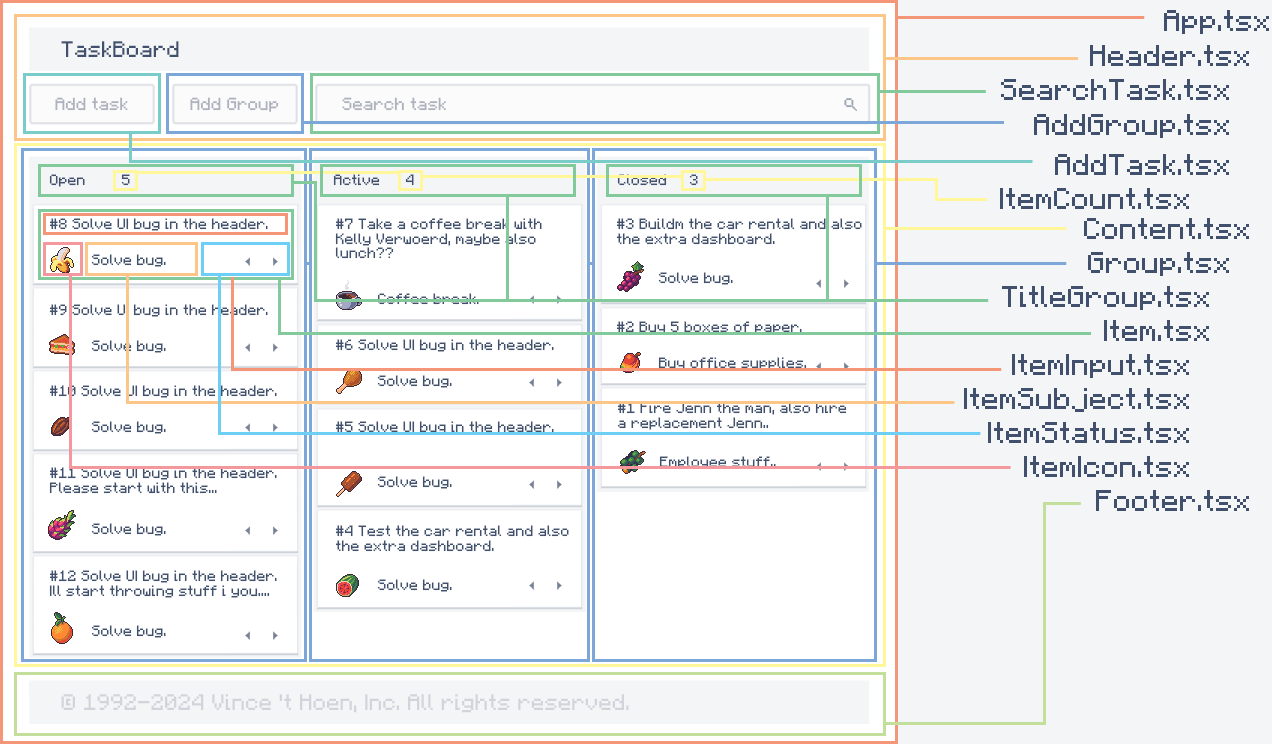
<style>
.page{position:relative;width:1272px;height:744px;background:#ffffff}
.page>*{position:absolute;margin:0}
.t1{font:24px "F77-Minecraft";color:#40506d}
.t2{font:18px "F77-Minecraft";color:#40506d}
.t3{font:14px "F77-Minecraft";color:#aeb2bd}
.t4{font:12px "F77-Minecraft";color:#40506d}
.t5{font:18px "F77-Minecraft";color:#d1d4da}
</style>
<div class="page">
<p class="t1" style="left:1164px;top:10px;width:105px;height:24px">App.tsx</p>
<p class="t2" style="left:61px;top:41px;width:118px;height:16px">TaskBoard</p>
<p class="t1" style="left:1090px;top:45px;width:159px;height:21px">Header.tsx</p>
<p class="t1" style="left:1001px;top:79px;width:228px;height:21px">SearchTask.tsx</p>
<p class="t3" style="left:55px;top:97px;width:73px;height:14px">Add task</p>
<p class="t3" style="left:190px;top:97px;width:89px;height:15px">Add Group</p>
<p class="t3" style="left:342px;top:97px;width:104px;height:14px">Search task</p>
<p class="t1" style="left:1034px;top:114px;width:195px;height:24px">AddGroup.tsx</p>
<p class="t1" style="left:1055px;top:154px;width:174px;height:21px">AddTask.tsx</p>
<p class="t4" style="left:49px;top:174px;width:81px;height:13px">Open 5</p>
<p class="t4" style="left:333px;top:174px;width:81px;height:12px">Active 4</p>
<p class="t4" style="left:617px;top:174px;width:81px;height:12px">Closed 3</p>
<p class="t1" style="left:1000px;top:188px;width:189px;height:21px">ItemCount.tsx</p>
<p class="t4" style="left:49px;top:218px;width:219px;height:13px">#8 Solve UI bug in the header.</p>
<p class="t4" style="left:335px;top:218px;width:207px;height:41px">#7 Take a coffee break with <br>Kelly Verwoerd, maybe also<br>lunch??</p>
<p class="t4" style="left:616px;top:218px;width:246px;height:27px">#3 Buildm the car rental and also the extra dashboard.</p>
<p class="t1" style="left:1084px;top:218px;width:165px;height:21px">Content.tsx</p>
<p class="t4" style="left:91px;top:254px;width:75px;height:13px">Solve bug.</p>
<p class="t1" style="left:1088px;top:252px;width:141px;height:24px">Group.tsx</p>
<p class="t4" style="left:658px;top:272px;width:75px;height:13px">Solve bug.</p>
<p class="t4" style="left:377px;top:293px;width:102px;height:12px">Coffee break.</p>
<p class="t1" style="left:1002px;top:286px;width:207px;height:24px">TitleGroup.tsx</p>
<p class="t4" style="left:49px;top:304px;width:219px;height:13px">#9 Solve UI bug in the header.</p>
<p class="t4" style="left:616px;top:321px;width:186px;height:13px">#2 Buy 5 boxes of paper.</p>
<p class="t1" style="left:1104px;top:320px;width:105px;height:21px">Item.tsx</p>
<p class="t4" style="left:91px;top:340px;width:75px;height:13px">Solve bug.</p>
<p class="t4" style="left:335px;top:339px;width:219px;height:13px">#6 Solve UI bug in the header.</p>
<p class="t4" style="left:658px;top:357px;width:149px;height:13px">Buy office supplies.</p>
<p class="t1" style="left:1012px;top:354px;width:177px;height:24px">ItemInput.tsx</p>
<p class="t4" style="left:377px;top:375px;width:75px;height:13px">Solve bug.</p>
<p class="t4" style="left:49px;top:385px;width:228px;height:13px">#10 Solve UI bug in the header.</p>
<p class="t1" style="left:964px;top:388px;width:225px;height:24px">ItemSubject.tsx</p>
<p class="t4" style="left:617px;top:402px;width:230px;height:28px">#1 Fire Jenn the man, also hire<br>a replacement Jenn..</p>
<p class="t4" style="left:91px;top:421px;width:75px;height:13px">Solve bug.</p>
<p class="t4" style="left:335px;top:421px;width:219px;height:13px">#5 Solve UI bug in the header.</p>
<p class="t1" style="left:988px;top:422px;width:201px;height:21px">ItemStatus.tsx</p>
<p class="t4" style="left:659px;top:456px;width:117px;height:13px">Employee stuff..</p>
<p class="t1" style="left:1024px;top:456px;width:165px;height:21px">ItemIcon.tsx</p>
<p class="t4" style="left:49px;top:467px;width:228px;height:27px">#11 Solve UI bug in the header.<br>Please start with this...</p>
<p class="t4" style="left:377px;top:476px;width:75px;height:13px">Solve bug.</p>
<p class="t1" style="left:1096px;top:490px;width:153px;height:21px">Footer.tsx</p>
<p class="t4" style="left:91px;top:523px;width:75px;height:13px">Solve bug.</p>
<p class="t4" style="left:335px;top:525px;width:234px;height:27px">#4 Test the car rental and also the extra dashboard.</p>
<p class="t4" style="left:49px;top:570px;width:228px;height:28px">#12 Solve UI bug in the header.<br>Ill start throwing stuff i you....</p>
<p class="t4" style="left:377px;top:579px;width:75px;height:13px">Solve bug.</p>
<p class="t4" style="left:91px;top:625px;width:75px;height:13px">Solve bug.</p>
<p class="t5" style="left:61px;top:694px;width:568px;height:19px">© 1992-2024 Vince 't Hoen, Inc. All rights reserved.</p>
</div>
